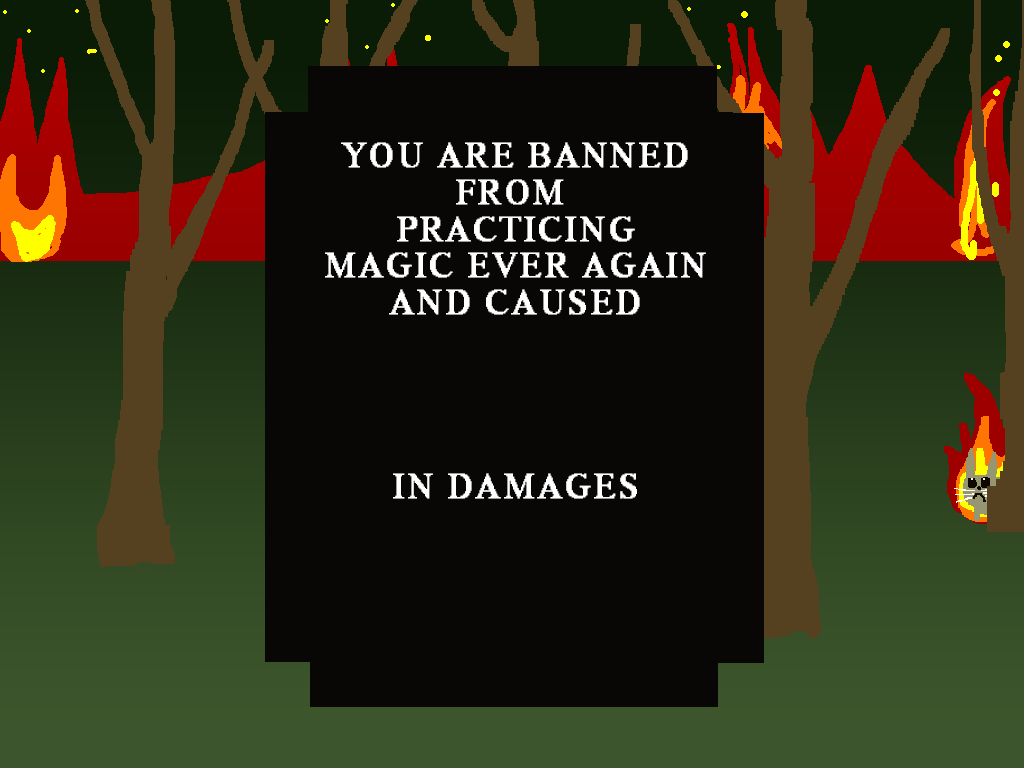
<style>
.page{position:relative;width:1024px;height:768px;background:#080706}
.page>*{position:absolute;margin:0}
.t1{font:35.8px/36.7px "MS Serif";letter-spacing:0.075em;color:#ffffff;font-weight:bold}
</style>
<div class="page">
<p class="t1" style="left:325px;top:142px;width:381px;height:357px;text-align:center">YOU ARE BANNED<br>FROM <br>PRACTICING<br>MAGIC EVER AGAIN<br>AND CAUSED<br><br><br><br><br>IN DAMAGES</p>
</div>
